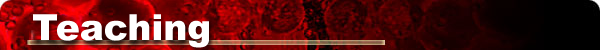
<style>
.page{position:relative;width:600px;height:50px}
.page>*{position:absolute;margin:0}
.t1{font:36px "Arial-Black";color:#fffefe}
</style>
<div class="page">
<p class="t1" style="left:33px;top:14px;width:176px;height:34px">Teaching</p>
</div>
